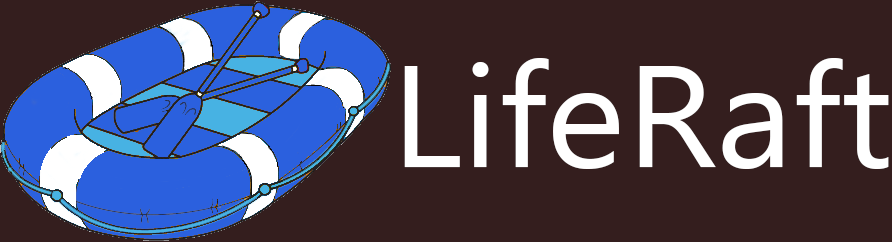
<style>
.page{position:relative;width:892px;height:242px;background:#341e1e}
.page>*{position:absolute;margin:0}
.t1{font:143.9px "MicrosoftTaiLe";color:#ffffff;scale:1.05 1}
</style>
<div class="page">
<p class="t1" style="left:404px;top:58px;width:485px;height:111px">LifeRaft</p>
</div>
